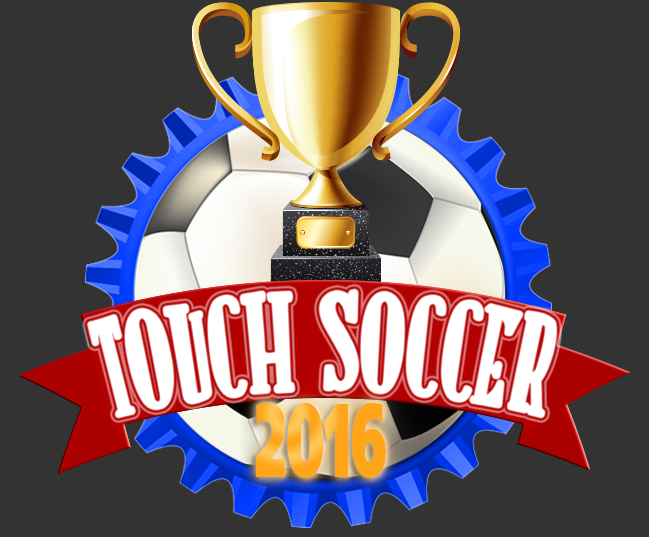
<style>
.page{position:relative;width:649px;height:537px;background:#333333}
.page>*{position:absolute;margin:0}
.t1{font:134.5px "LATRUITEAPAPA";letter-spacing:0.04em;color:#ffffff;scale:0.84 1}
.t2{font:104px "StarJedi";scale:0.5 1}
</style>
<div class="page">
<p class="t1" style="left:90px;top:292px;width:465px;height:124px">TOUCH SOCCER</p>
<p class="t2" style="left:256px;top:403px;width:130px;height:75px">2016</p>
<p class="t2" style="left:256px;top:403px;width:130px;height:75px">2016</p>
</div>
